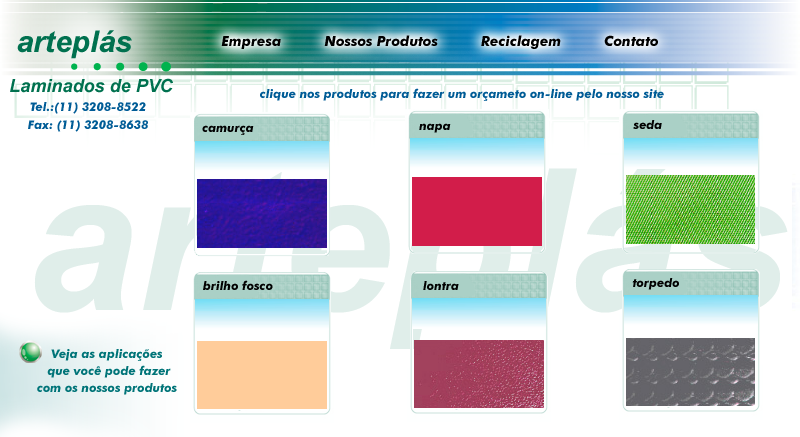
<style>
.page{position:relative;width:800px;height:437px;background:#ffffff}
.page>*{position:absolute;margin:0}
.t1{font:30px "Arial-BoldItalicMT";letter-spacing:0.002em;color:#00714f}
.t2{font:14px "FuturaBT-BoldItalic";letter-spacing:0.002em;color:#000000}
.t3{font:18px "Arial-BoldItalicMT";letter-spacing:0.002em;color:#00714f}
.t4{font:12px "FuturaBT-BoldItalic";letter-spacing:0.002em;color:#005c96}
.t5{font:12px/92.3px "FuturaBT-BoldItalic";letter-spacing:0.002em;color:#005c96}
.t6{font:12px/6px "FuturaBT-BoldItalic";letter-spacing:0.002em;color:#005c96}
.t7{font:12px "FuturaBT-BoldItalic";letter-spacing:0.002em;color:#020202}
.t8{font:12px "FuturaBT-BoldItalic";letter-spacing:0.002em;color:#007478}
</style>
<div class="page">
<p class="t1" style="left:17px;top:30px;width:115px;height:29px">arteplás</p>
<p class="t2" style="left:221px;top:35px;width:437px;height:14px">Empresa          Nossos Produtos          Reciclagem          Contato</p>
<p class="t3" style="left:10px;top:78px;width:163px;height:15px">Laminados de PVC</p>
<p class="t4" style="left:260px;top:88px;width:404px;height:13px">clique nos produtos para fazer um orçameto on-line pelo nosso site</p>
<p class="t5" style="left:28px;top:102px;width:120px;height:30px;text-align:center">Tel.:(11) 3208-8522<span class="t6"><br><br><br>Fax: (11) 3208-8638</span></p>
<p class="t7" style="left:202px;top:125px;width:52px;height:10px">camurça</p>
<p class="t7" style="left:419px;top:123px;width:32px;height:10px">napa</p>
<p class="t7" style="left:633px;top:120px;width:29px;height:9px">seda</p>
<p class="t7" style="left:203px;top:280px;width:70px;height:10px">brilho fosco</p>
<p class="t7" style="left:423px;top:281px;width:36px;height:9px">lontra</p>
<p class="t7" style="left:632px;top:278px;width:47px;height:12px">torpedo</p>
<p class="t8" style="left:51px;top:349px;width:111px;height:12px">Veja as aplicações</p>
<p class="t8" style="left:47px;top:365px;width:124px;height:13px">que você pode fazer</p>
<p class="t8" style="left:37px;top:383px;width:140px;height:12px">com os nossos produtos</p>
</div>
